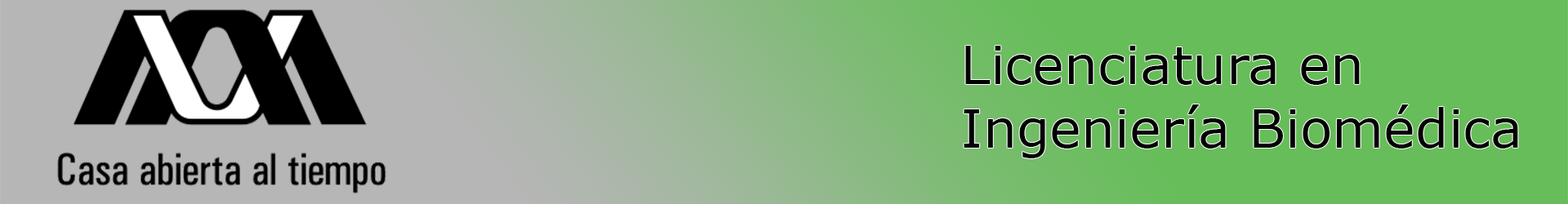
<style>
.page{position:relative;width:1568px;height:204px;background:#67bd59}
.page>*{position:absolute;margin:0}
.t1{font:53.1px "Verdana";color:#000000}
</style>
<div class="page">
<p class="t1" style="left:964px;top:46px;width:554px;height:112px">Licenciatura en<br>Ingeniería Biomédica</p>
</div>
